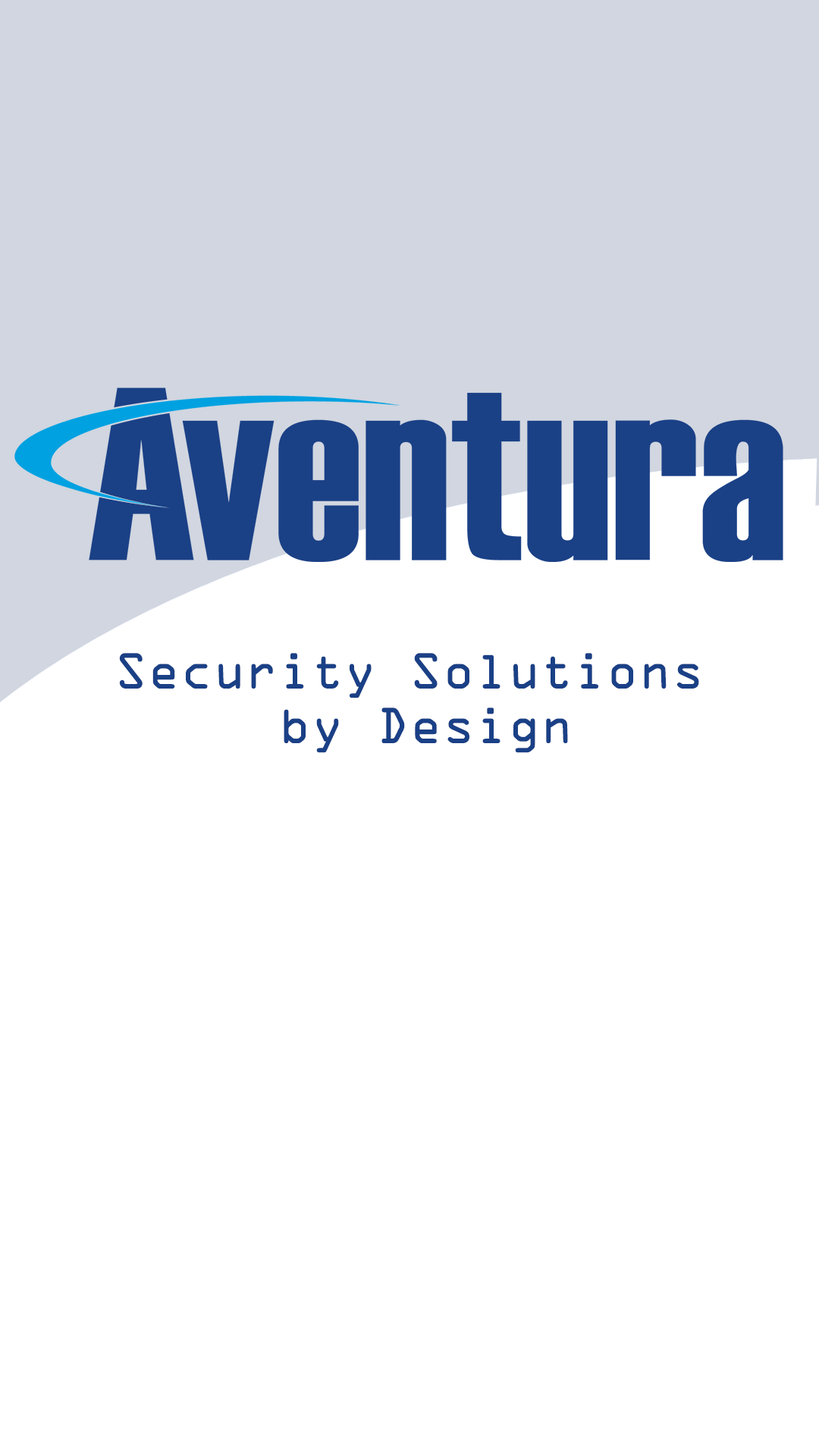
<style>
.page{position:relative;width:819px;height:1456px;background:#ffffff}
.page>*{position:absolute;margin:0}
.t1{font:45.5px "OCRAStd";color:#1a4086}
</style>
<div class="page">
<p class="t1" style="left:119px;top:653px;width:580px;height:100px;text-align:center">Security Solutions<br> by Design</p>
</div>
